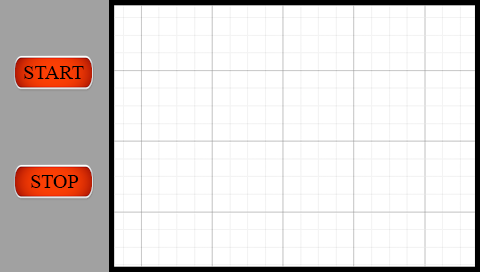
<style>
.page{position:relative;width:480px;height:272px;background:#ffffff}
.page>*{position:absolute;margin:0}
.t1{font:20px "TimesNewRomanPSMT";color:#000000}
</style>
<div class="page">
<p class="t1" style="left:24px;top:66px;width:60px;height:13px">START</p>
<p class="t1" style="left:31px;top:175px;width:48px;height:13px">STOP</p>
</div>
